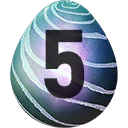
<style>
.page{position:relative;width:128px;height:128px;background:#ffffff}
.page>*{position:absolute;margin:0}
.t1{font:96px "Bahnschrift-Bold";color:#2c2a30}
</style>
<div class="page">
<p class="t1" style="left:44px;top:29px;width:41px;height:70px">5</p>
</div>
